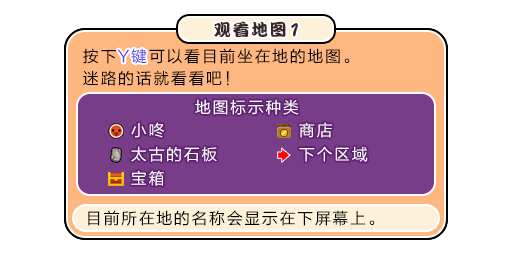
<style>
.page{position:relative;width:512px;height:256px;background:#ffffff}
.page>*{position:absolute;margin:0}
.t1{font:17px "DFPKanTingLiuW9";letter-spacing:0.1em;color:#3b2626}
.t2{font:19.5px "DFPKanTingLiuW9";letter-spacing:0.1em;color:#3b2626;scale:0.87 1}
.t3{font:16px/22px "FZLTHJW--GB1-0";letter-spacing:0.1em;color:#000000}
.t4{font:16px/22px "FZLTHJW--GB1-0";letter-spacing:0.1em;color:#5444ed}
.t5{font:16px "FZLTHJW--GB1-0";letter-spacing:0.1em;color:#5444ed}
.t6{font:16px "FZLTHJW--GB1-0";letter-spacing:0.1em;color:#ffffff}
.t7{font:16px "FZLTHJW--GB1-0";letter-spacing:0.1em;color:#000000}
</style>
<div class="page">
<p class="t1" style="left:214px;top:21px;width:84px;height:17px">观看地图<span class="t2">1</span></p>
<p class="t3" style="left:83px;top:48px;width:267px;height:38px">按下<span class="t4">Y键</span>可以看目前坐在地的地图。<br>迷路的话就看看吧！</p>
<p class="t5" style="left:117px;top:48px;width:30px;height:16px">Y键</p>
<p class="t6" style="left:195px;top:99px;width:104px;height:16px">地图标示种类</p>
<p class="t6" style="left:131px;top:122px;width:33px;height:16px">小咚</p>
<p class="t6" style="left:299px;top:122px;width:33px;height:16px">商店</p>
<p class="t6" style="left:131px;top:146px;width:86px;height:16px">太古的石板</p>
<p class="t6" style="left:299px;top:146px;width:69px;height:16px">下个区域</p>
<p class="t6" style="left:131px;top:170px;width:33px;height:16px">宝箱</p>
<p class="t7" style="left:88px;top:210px;width:287px;height:16px">目前所在地的名称会显示在下屏幕上。</p>
</div>
